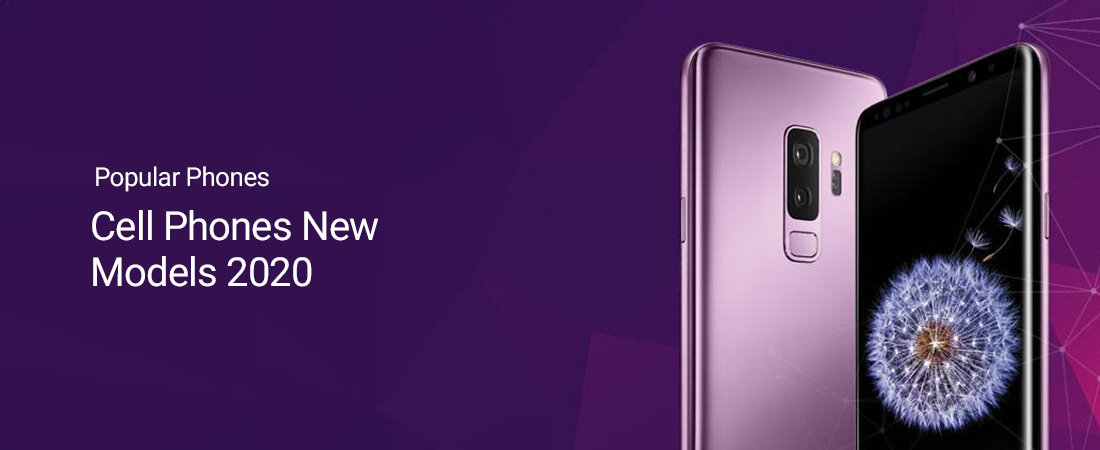
<style>
.page{position:relative;width:1100px;height:450px;background:#34104e}
.page>*{position:absolute;margin:0}
.t1{font:26px "Roboto-Regular";letter-spacing:-0.02em;color:#ffffff}
.t2{font:40px/46px "Roboto-Regular";letter-spacing:-0.02em;color:#ffffff}
</style>
<div class="page">
<p class="t1" style="left:96px;top:166px;width:173px;height:26px">Popular Phones</p>
<p class="t2" style="left:92px;top:210px;width:286px;height:77px">Cell Phones New<br>Models 2020</p>
</div>
